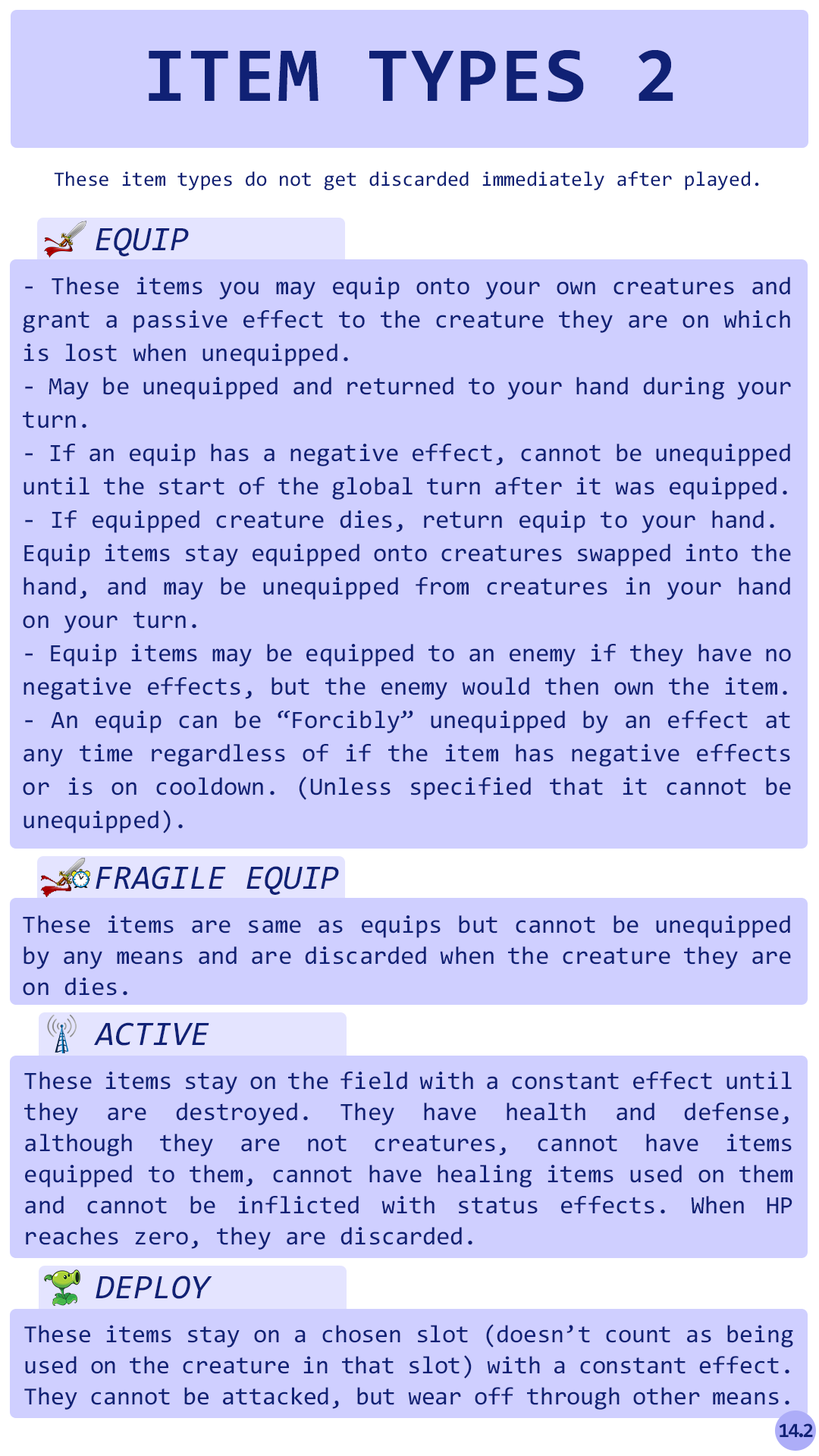
<style>
.page{position:relative;width:819px;height:1456px;background:#cfcfff}
.page>*{position:absolute;margin:0}
.t1{font:78.3px "Consolas-Bold";letter-spacing:0.02em;color:#102175}
.t2{font:20.5px "Consolas";color:#102175}
.t3{font:34.3px "Consolas-Italic";color:#102175}
.t4{font:25px/33.4px "Consolas";color:#102175}
.t5{font:25px/31.1px "Consolas";color:#102175}
.t6{font:24.6px/31.1px "Consolas";color:#102175}
.t7{font:20.5px "Consolas-Bold";letter-spacing:-0.06em;color:#102175}
.t8{font:20.5px "Consolas-Bold";letter-spacing:-0.2em;color:#102175}
.t9{font:20.5px "Consolas-Bold";letter-spacing:-0.22em;color:#102175}
</style>
<div class="page">
<p class="t1" style="left:149px;top:50px;width:524px;height:52px">ITEM TYPES 2</p>
<p class="t2" style="left:54px;top:171px;width:705px;height:19px">These item types do not get discarded immediately after played.</p>
<p class="t3" style="left:96px;top:227px;width:93px;height:29px">EQUIP</p>
<p class="t4" style="left:23px;top:277px;width:768px;height:556px;text-align:justify">- These items you may equip onto your own creatures and grant a passive effect to the creature they are on which is lost when unequipped. <br>- May be unequipped and returned to your hand during your turn.<br>- If an equip has a negative effect, cannot be unequipped until the start of the global turn after it was equipped. <br>- If equipped creature dies, return equip to your hand. <br>Equip items stay equipped onto creatures swapped into the hand, and may be unequipped from creatures in your hand on your turn.<br>- Equip items may be equipped to an enemy if they have no negative effects, but the enemy would then own the item.<br>- An equip can be “Forcibly” unequipped by an effect at any time regardless of if the item has negative effects or is on cooldown. (Unless specified that it cannot be unequipped).</p>
<p class="t3" style="left:96px;top:866px;width:243px;height:29px">FRAGILE EQUIP</p>
<p class="t5" style="left:23px;top:915px;width:768px;height:81px;text-align:justify">These items are same as equips but cannot be unequipped by any means and are discarded when the creature they are on dies.</p>
<p class="t3" style="left:94px;top:1022px;width:115px;height:24px">ACTIVE</p>
<p class="t5" style="left:24px;top:1072px;width:768px;height:178px;text-align:justify">These items stay on the field with a constant effect until they are destroyed. They have health and defense, although they are not creatures, cannot have items equipped to them, cannot have healing items used on them and cannot be inflicted with status effects. When HP reaches zero, they are discarded.</p>
<p class="t3" style="left:96px;top:1275px;width:116px;height:24px">DEPLOY</p>
<p class="t6" style="left:24px;top:1324px;width:769px;height:86px;text-align:justify">These items stay on a chosen slot (doesn’t count as being used on the creature in that slot) with a constant effect. They cannot be attacked, but wear off through other means.</p>
<p class="t7" style="left:779px;top:1423px;width:34px;height:15px">1<span class="t8">4</span><span class="t9">.</span>2</p>
</div>
